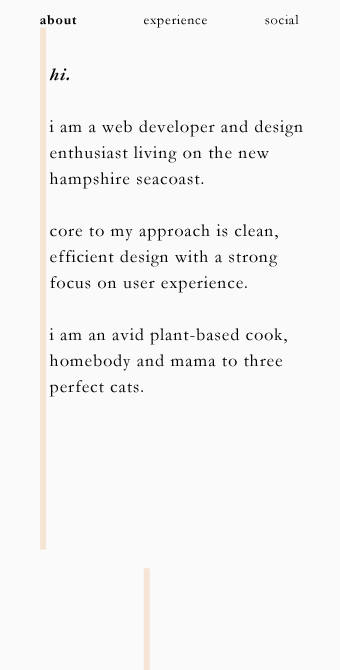
<style>
.page{position:relative;width:340px;height:670px;background:#fafafa}
.page>*{position:absolute;margin:0}
.t1{font:14px "Garamond-Bold";letter-spacing:0.05em;color:#010101}
.t2{font:14px "Garamond";letter-spacing:0.05em;color:#010101}
.t3{font:18px/26px "Garamond";letter-spacing:0.05em;color:#010101}
.t4{font:18px/26px "Garamond-BoldItalic";letter-spacing:0.05em;color:#010101}
</style>
<div class="page">
<p class="t1" style="left:40px;top:15px;width:37px;height:10px">about</p>
<p class="t2" style="left:144px;top:14px;width:63px;height:14px">experience</p>
<p class="t2" style="left:265px;top:14px;width:34px;height:11px">social</p>
<p class="t3" style="left:49px;top:68px;width:254px;height:329px"><span class="t4">hi. <br><br></span>i am a web developer and design enthusiast living on the new hampshire seacoast.<br><br>core to my approach is clean, efficient design with a strong focus on user experience.<br><br>i am an avid plant-based cook, homebody and mama to three perfect cats.</p>
</div>
